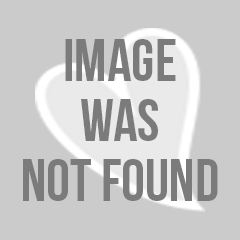
<style>
.page{position:relative;width:240px;height:240px;background:#cbcbcb}
.page>*{position:absolute;margin:0}
.t1{font:60px/60px "BebasNeueBold";color:#7b7b7b}
</style>
<div class="page">
<p class="t1" style="left:23px;top:39px;width:195px;height:162px;text-align:center">IMAGE<br>WAS<br>NOT FOUND</p>
</div>
